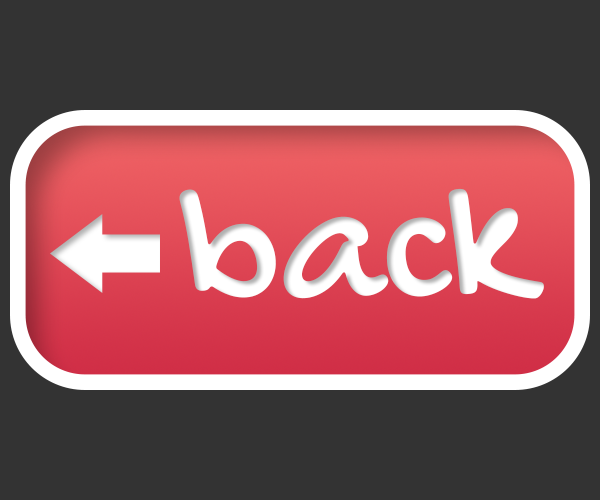
<style>
.page{position:relative;width:600px;height:500px;background:#333333}
.page>*{position:absolute;margin:0}
.t1{font:184.6px "GochiHand-Regular";color:#ffffff}
</style>
<div class="page">
<p class="t1" style="left:179px;top:188px;width:365px;height:111px;rotate:-3deg">back</p>
</div>
